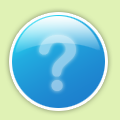
<style>
.page{position:relative;width:120px;height:120px;background:#e0f2b5}
.page>*{position:absolute;margin:0}
.t1{font:75px "ArialRoundedMTBold";color:#8fceec}
</style>
<div class="page">
<p class="t1" style="left:39px;top:35px;width:37px;height:56px">?</p>
</div>
